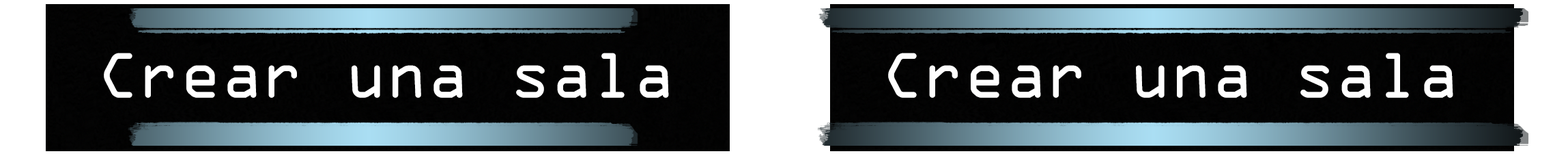
<style>
.page{position:relative;width:1568px;height:156px}
.page>*{position:absolute;margin:0}
.t1{font:68.3px "OCRAExtended";color:#ffffff}
.t2{font:68.3px "OCRAExtended";color:#fefefe}
</style>
<div class="page">
<p class="t1" style="left:104px;top:53px;width:565px;height:45px">Crear una sala</p>
<p class="t2" style="left:888px;top:53px;width:565px;height:45px">Crear una sala</p>
</div>
